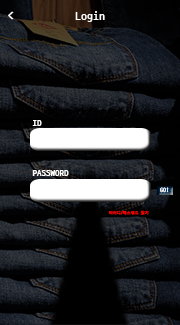
<style>
.page{position:relative;width:180px;height:325px}
.page>*{position:absolute;margin:0}
.t1{font:12px "D2CodingBold";color:#ffffff}
.t2{font:9px "D2CodingBold";color:#ffffff}
.t3{font:6px "D2CodingBold";color:#ffffff}
.t4{font:4px "D2CodingBold";color:#ff0000}
</style>
<div class="page">
<p class="t1" style="left:8px;top:11px;width:6px;height:9px">&lt;</p>
<p class="t1" style="left:75px;top:11px;width:30px;height:11px">Login</p>
<p class="t2" style="left:32px;top:120px;width:10px;height:6px">ID</p>
<p class="t2" style="left:32px;top:170px;width:37px;height:6px">PASSWORD</p>
<p class="t3" style="left:160px;top:187px;width:9px;height:6px">GO!</p>
<p class="t4" style="left:109px;top:210px;width:40px;height:5px">아이디/패스워드 찾기</p>
</div>
